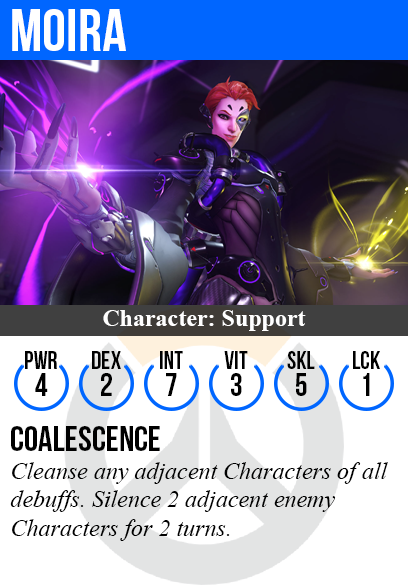
<style>
.page{position:relative;width:408px;height:585px;background:#ffffff}
.page>*{position:absolute;margin:0}
.t1{font:60px "BebasNeue";color:#ffffff}
.t2{font:24px "TimesNewRomanPS-BoldMT";color:#ffffff}
.t3{font:25px "BebasNeue";color:#000000}
.t4{font:32px "BebasNeue";color:#000000}
.t5{font:36px "BebasNeue";color:#000000}
.t6{font:24px "TimesNewRomanPS-ItalicMT";color:#000000}
</style>
<div class="page">
<p class="t1" style="left:12px;top:9px;width:114px;height:42px">moira</p>
<p class="t2" style="left:103px;top:310px;width:203px;height:21px">Character: Support</p>
<p class="t3" style="left:25px;top:351px;width:32px;height:18px">PWR</p>
<p class="t3" style="left:92px;top:351px;width:29px;height:18px">dex</p>
<p class="t3" style="left:160px;top:351px;width:23px;height:18px">int</p>
<p class="t3" style="left:224px;top:351px;width:24px;height:18px">vit</p>
<p class="t3" style="left:287px;top:351px;width:28px;height:18px">skl</p>
<p class="t3" style="left:353px;top:351px;width:27px;height:18px">lck</p>
<p class="t4" style="left:35px;top:373px;width:13px;height:23px">4</p>
<p class="t4" style="left:101px;top:373px;width:11px;height:23px">2</p>
<p class="t4" style="left:166px;top:373px;width:11px;height:23px">7</p>
<p class="t4" style="left:231px;top:373px;width:11px;height:23px">3</p>
<p class="t4" style="left:296px;top:373px;width:11px;height:23px">5</p>
<p class="t4" style="left:363px;top:373px;width:7px;height:23px">1</p>
<p class="t5" style="left:11px;top:426px;width:149px;height:25px">coalescence</p>
<p class="t6" style="left:10px;top:462px;width:378px;height:79px">Cleanse any adjacent Characters of all<br>debuffs. Silence 2 adjacent enemy<br>Characters for 2 turns.</p>
</div>
